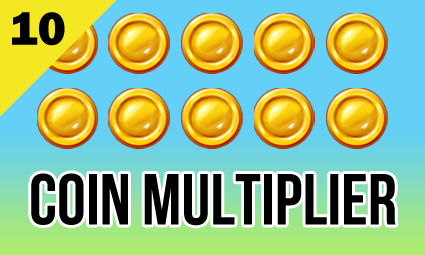
<style>
.page{position:relative;width:425px;height:255px;background:#64cff7}
.page>*{position:absolute;margin:0}
.t1{font:48px "FranklinGothic-Heavy";color:#000000}
.t2{font:72px "BebasNeueBold";color:#000000}
</style>
<div class="page">
<p class="t1" style="left:12px;top:12px;width:53px;height:34px">10</p>
<p class="t2" style="left:31px;top:173px;width:365px;height:53px">COIN MULTIPLIER</p>
</div>
